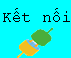
<style>
.page{position:relative;width:71px;height:58px;background:#00ffff}
.page>*{position:absolute;margin:0}
.t1{font:16px "CourierNewPSMT";color:#000000}
</style>
<div class="page">
<p class="t1" style="left:3px;top:8px;width:67px;height:14px">Kết nối</p>
</div>
